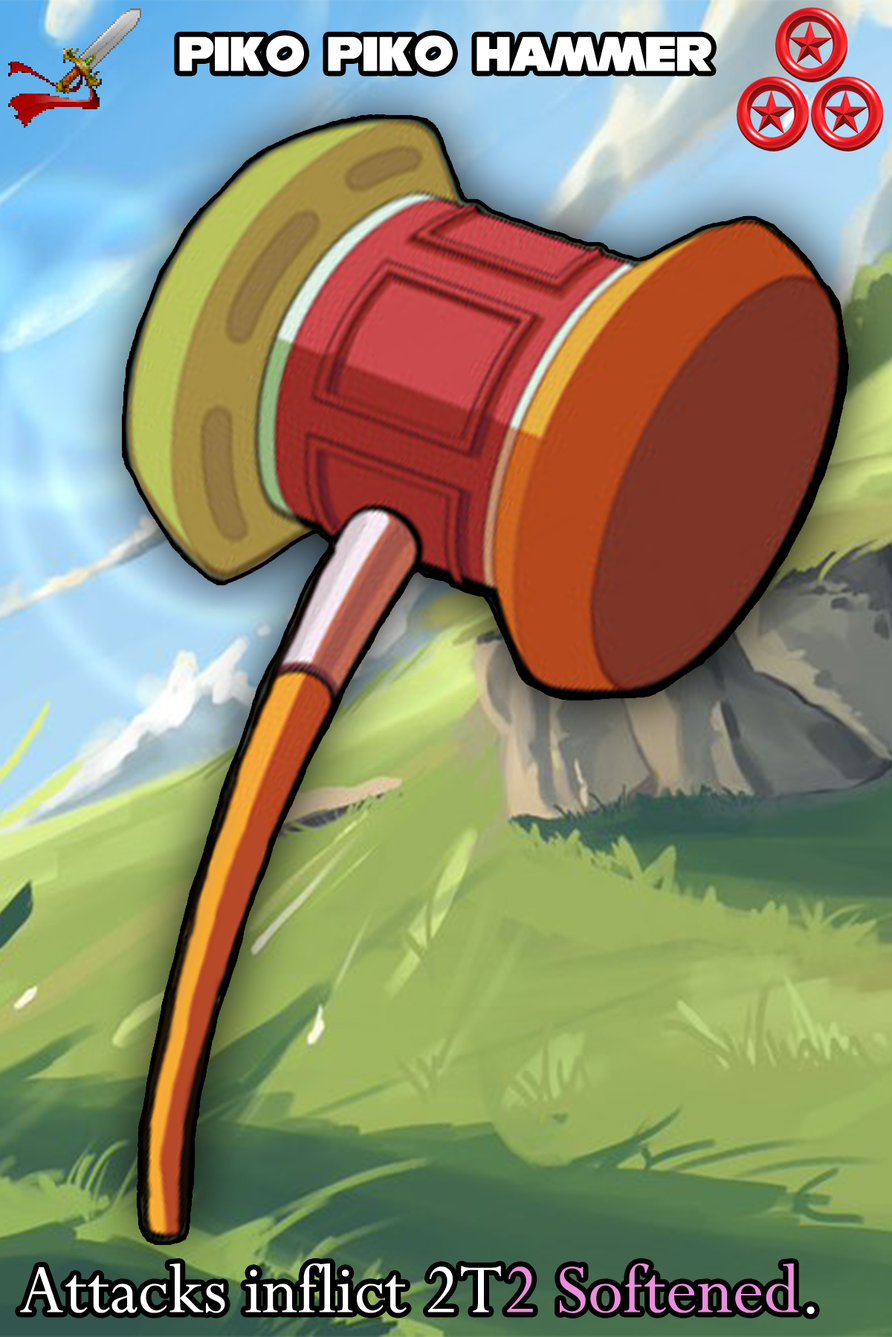
<style>
.page{position:relative;width:892px;height:1337px}
.page>*{position:absolute;margin:0}
.t1{font:74.3px "NiseSegaSonic";color:#ffffff}
.t2{font:77.3px "Perpetua";color:#ffffff}
.t3{font:77.3px "Perpetua";color:#e98fdb}
</style>
<div class="page">
<p class="t1" style="left:179px;top:35px;width:532px;height:37px">Piko Piko Hammer</p>
<p class="t2" style="left:20px;top:1264px;width:794px;height:50px">Attacks inflict 2T<span class="t3">2 Softened</span>.</p>
</div>
